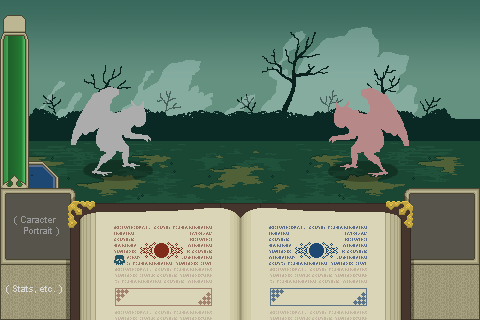
<style>
.page{position:relative;width:480px;height:320px}
.page>*{position:absolute;margin:0}
.t1{font:9px "ArialMT";color:#9b9b9b}
.t2{font:9px "ArialMT";color:#dadada}
</style>
<div class="page">
<p class="t1" style="left:14px;top:216px;width:45px;height:20px">( Caracter<br>   Portrait )</p>
<p class="t2" style="left:6px;top:285px;width:56px;height:9px">( Stats, etc. )</p>
</div>
